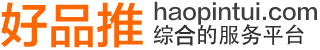
<style>
.page{position:relative;width:320px;height:50px;background:#ffffff}
.page>*{position:absolute;margin:0}
.t1{font:48px "FZLTZHB--B51-0";color:#ff6600}
.t2{font:22px "FZLTZHB--B51-0";color:#3f3f3f}
.t3{font:22px "AdobeHeitiStd-Regular";color:#303030}
.t4{font:22px "FZLTZHB--B51-0";color:#303030}
</style>
<div class="page">
<p class="t1" style="left:1px;top:2px;width:142px;height:46px">好品推</p>
<p class="t2" style="left:154px;top:1px;width:163px;height:24px">haopintui.com</p>
<p class="t3" style="left:153px;top:24px;width:151px;height:22px">综<span class="t4">合</span>的服务平台</p>
</div>
